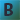
<style>
.page{position:relative;width:20px;height:20px}
.page>*{position:absolute;margin:0}
.t1{font:18px "MyriadPro-Bold";color:#2a2c38}
</style>
<div class="page">
<p class="t1" style="left:4px;top:3px;width:9px;height:13px">B</p>
</div>
